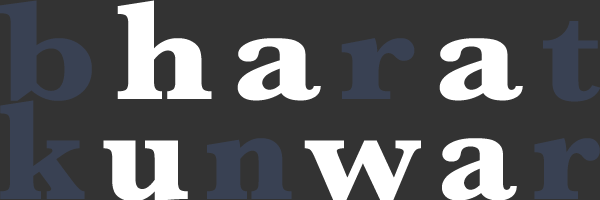
<style>
.page{position:relative;width:600px;height:200px;background:#333333}
.page>*{position:absolute;margin:0}
.t1{font:145.8px/100px "Baskerville-Bold";letter-spacing:0.105em;color:#ffffff;scale:1.11 1}
.t2{font:145.8px/100px "Baskerville-Bold";letter-spacing:0.105em;color:#394153;scale:1.11 1}
.t3{font:145.8px/100px "Baskerville-Bold";letter-spacing:0.1em;color:#394153}
.t4{font:145.8px/100px "Baskerville-Bold";letter-spacing:0.1em;color:#ffffff}
</style>
<div class="page">
<p class="t1" style="left:0px;top:0px;width:601px;height:202px"><span class="t2">b</span>ha<span class="t2">r</span>a<span class="t2">t<br></span><span class="t3">k</span><span class="t4">u</span><span class="t3">n</span><span class="t4">wa</span><span class="t3">r</span></p>
</div>
